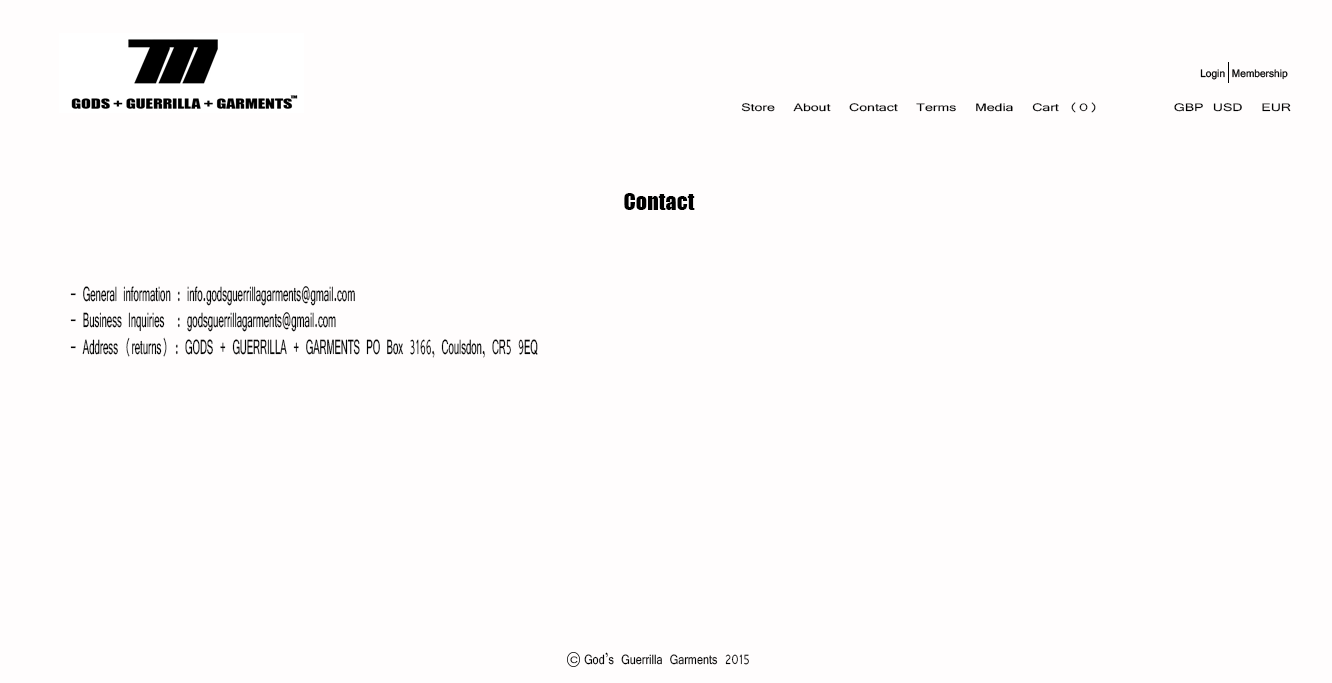
<style>
.page{position:relative;width:1332px;height:683px;background:#fffdfd}
.page>*{position:absolute;margin:0}
.t1{font:11.7px "Vrinda";color:#000000;scale:1.35 1}
.t2{font:22.2px "Impact";color:#000000}
.t3{font:22.2px "Vrinda";color:#020202;scale:0.48 1}
.t4{font:14.6px "Vrinda";color:#000000;scale:0.83 1}
.t5{font:10px "Vrinda";scale:1.24 1}
</style>
<div class="page">
<p class="t1" style="left:741px;top:102px;width:550px;height:11px">Store  About  Contact  Terms  Media  Cart (0)        GBP USD  EUR</p>
<p class="t2" style="left:624px;top:193px;width:71px;height:17px">Contact</p>
<p class="t3" style="left:70px;top:286px;width:468px;height:72px">- General information : info.godsguerrillagarments@gmail.com<br>- Business Inquiries  : godsguerrillagarments@gmail.com<br>- Address (returns) : GODS + GUERRILLA + GARMENTS PO Box 3166, Coulsdon, CR5 9EQ</p>
<p class="t4" style="left:584px;top:652px;width:165px;height:13px">God’s Guerrilla Garments 2015</p>
<p class="t5" style="left:570px;top:656px;width:8px;height:8px">C</p>
</div>
